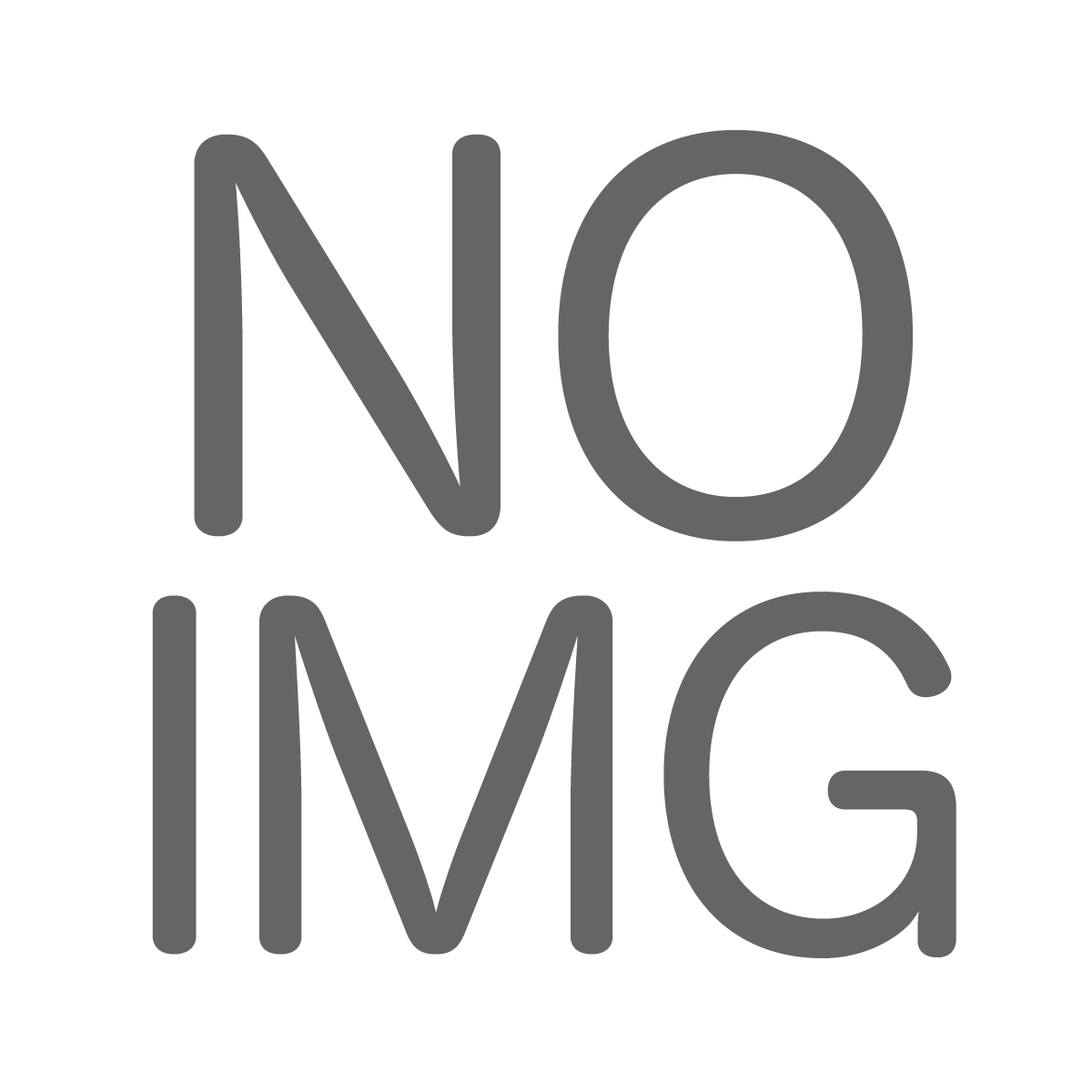
<style>
.page{position:relative;width:1092px;height:1092px;background:#ffffff}
.page>*{position:absolute;margin:0}
.t1{font:507.7px "HiraMaruPro-W4";color:#656565}
.t2{font:453.3px "HiraMaruPro-W4";color:#656565}
</style>
<div class="page">
<p class="t1" style="left:194px;top:130px;width:719px;height:411px">NO</p>
<p class="t2" style="left:152px;top:591px;width:804px;height:367px">IMG</p>
</div>
